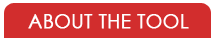
<style>
.page{position:relative;width:216px;height:38px;background:#d22d2d}
.page>*{position:absolute;margin:0}
.t1{font:19px "CenturyGothic";color:#ffffff;font-weight:bold}
</style>
<div class="page">
<p class="t1" style="left:28px;top:14px;width:161px;height:15px">ABOUT THE TOOL</p>
</div>
